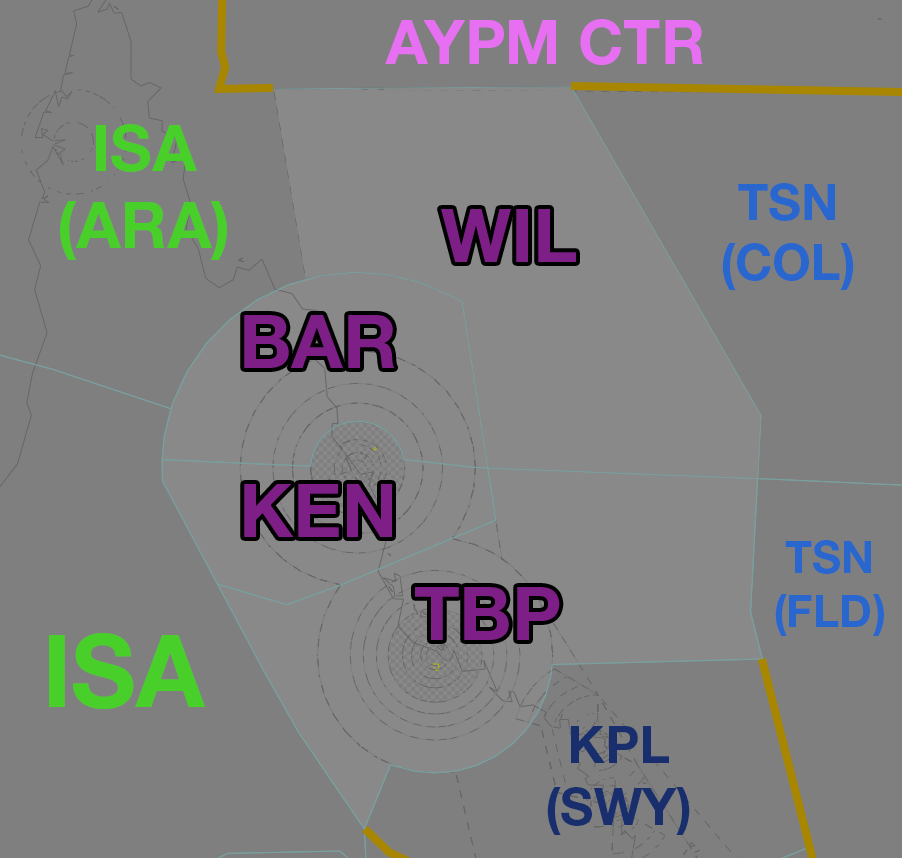
<style>
.page{position:relative;width:902px;height:858px;background:#7f7f7f}
.page>*{position:absolute;margin:0}
.t1{font:62px "HelveticaNeueLTStd-Bd";color:#e670f1}
.t2{font:64.1px "HelveticaNeueLTStd-Bd";color:#48cf29}
.t3{font:50.3px "HelveticaNeueLTStd-Bd";color:#2967cf}
.t4{font:74.6px "HelveticaNeueLTStd-Bd";color:#7e1e87}
.t5{font:44.9px "HelveticaNeueLTStd-Bd";color:#2967cf}
.t6{font:100.2px "HelveticaNeueLTStd-Bd";color:#48cf29}
.t7{font:51.6px "HelveticaNeueLTStd-Bd";color:#182e6d}
</style>
<div class="page">
<p class="t1" style="left:385px;top:19px;width:318px;height:46px">AYPM CTR</p>
<p class="t2" style="left:60px;top:124px;width:167px;height:136px;text-align:center">ISA<br>(ARA)</p>
<p class="t3" style="left:722px;top:183px;width:132px;height:107px;text-align:center">TSN<br>(COL)</p>
<p class="t4" style="left:441px;top:209px;width:135px;height:53px">WIL</p>
<p class="t4" style="left:244px;top:315px;width:151px;height:53px">BAR</p>
<p class="t4" style="left:244px;top:484px;width:148px;height:53px">KEN</p>
<p class="t5" style="left:775px;top:540px;width:109px;height:96px;text-align:center">TSN<br>(FLD)</p>
<p class="t4" style="left:415px;top:587px;width:145px;height:53px">TBP</p>
<p class="t6" style="left:49px;top:633px;width:156px;height:76px">ISA</p>
<p class="t7" style="left:547px;top:726px;width:143px;height:109px;text-align:center">KPL<br>(SWY)</p>
</div>
